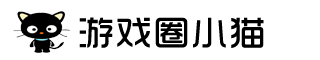
<style>
.page{position:relative;width:320px;height:60px;background:#ffffff}
.page>*{position:absolute;margin:0}
.t1{font:36px "TRENDS";letter-spacing:0.05em;color:#000000}
</style>
<div class="page">
<p class="t1" style="left:79px;top:17px;width:185px;height:31px">游戏圈小猫</p>
</div>
